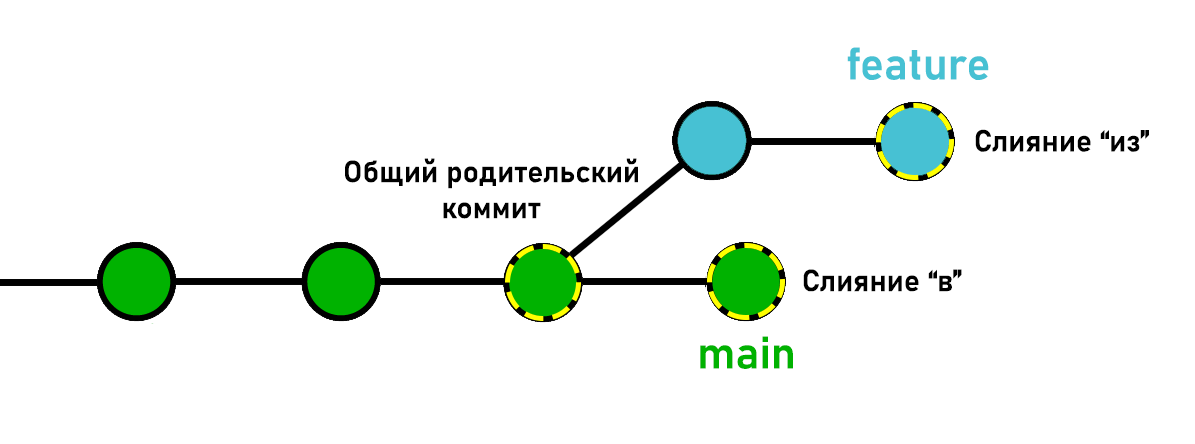
<style>
.page{position:relative;width:1195px;height:444px;background:#ffffff}
.page>*{position:absolute;margin:0}
.t1{font:45px "Bahnschrift-SemiBold";color:#47c1d3}
.t2{font:30px "Bahnschrift-SemiBold";color:#000000}
.t3{font:45px "Bahnschrift-SemiBold";color:#00b200}
</style>
<div class="page">
<p class="t1" style="left:847px;top:47px;width:142px;height:33px">feature</p>
<p class="t2" style="left:975px;top:129px;width:174px;height:23px">Слияние “из”</p>
<p class="t2" style="left:345px;top:158px;width:293px;height:61px;text-align:center">Общий родительский <br>коммит</p>
<p class="t2" style="left:803px;top:269px;width:159px;height:23px">Слияние “в”</p>
<p class="t3" style="left:700px;top:336px;width:93px;height:33px">main</p>
</div>
